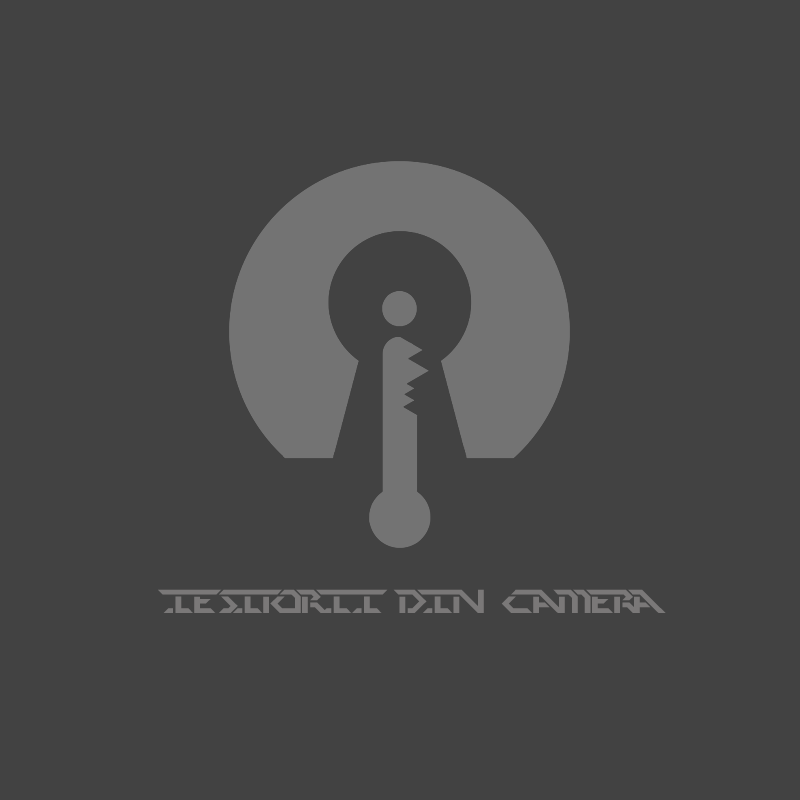
<style>
.page{position:relative;width:800px;height:800px;background:#424242}
.page>*{position:absolute;margin:0}
.t1{font:33.3px "PerfectDark(BRK)";color:#7a7878}
</style>
<div class="page">
<p class="t1" style="left:158px;top:589px;width:508px;height:24px">IESITORII DIN CAMERA</p>
</div>
